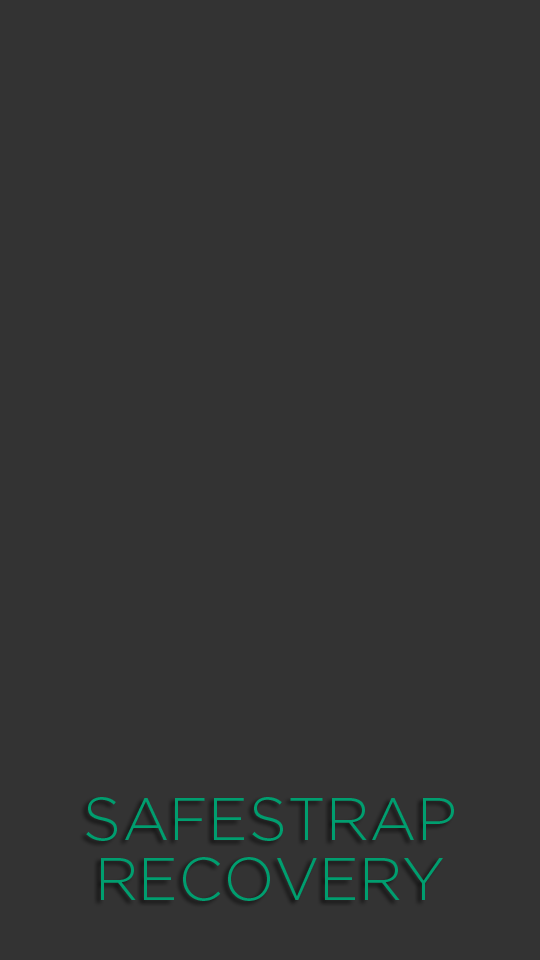
<style>
.page{position:relative;width:540px;height:960px;background:#333333}
.page>*{position:absolute;margin:0}
.t1{font:60px/60px "Gotham-Light";color:#009e6f;text-transform:uppercase}
</style>
<div class="page">
<p class="t1" style="left:86px;top:797px;width:368px;height:104px;text-align:center">SAFESTRAP<br>RECOVERY</p>
</div>
